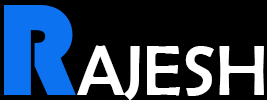
<style>
.page{position:relative;width:267px;height:100px;background:#000000}
.page>*{position:absolute;margin:0}
.t1{font:134.7px "Bauhaus93";color:#0c72f0}
.t2{font:72px "BerlinSansFB-Reg";color:#ffffff}
</style>
<div class="page">
<p class="t1" style="left:4px;top:5px;width:72px;height:90px">R</p>
<p class="t2" style="left:77px;top:45px;width:187px;height:55px">AJESH</p>
</div>
